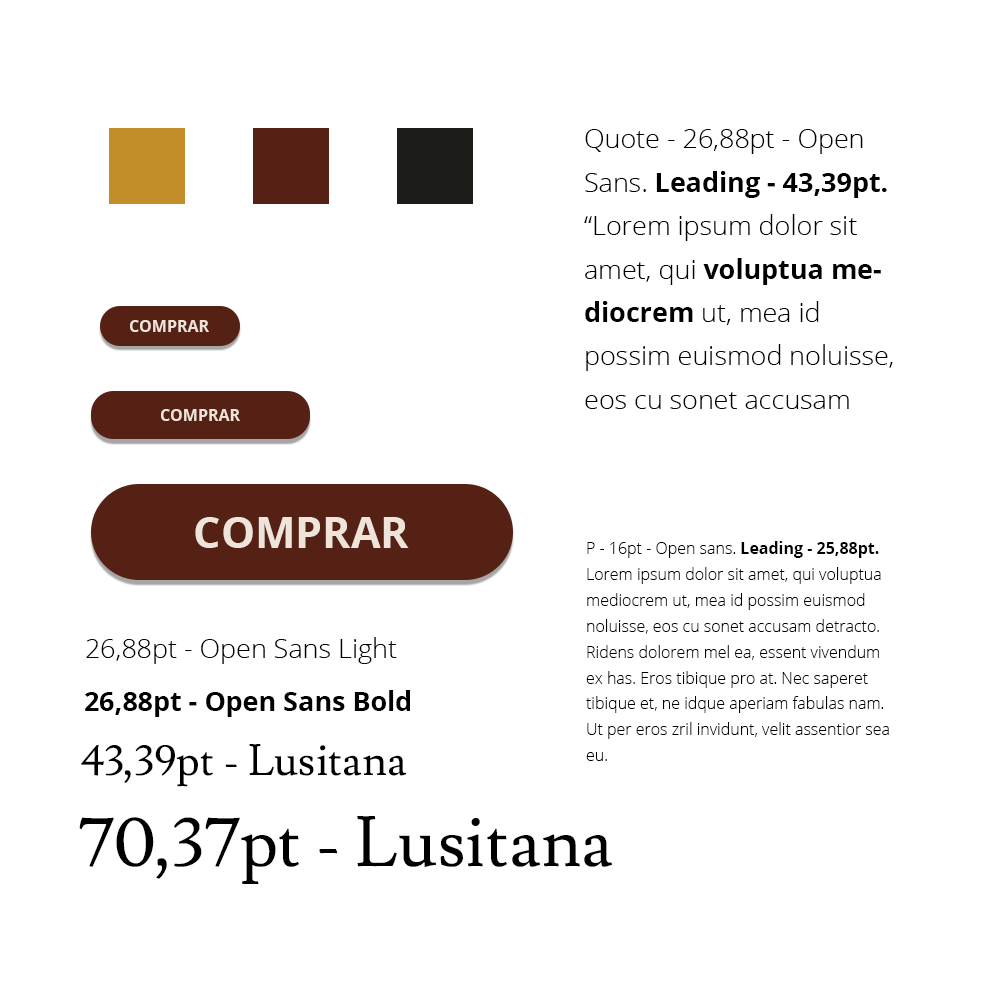
<style>
.page{position:relative;width:1000px;height:1000px;background:#ffffff}
.page>*{position:absolute;margin:0}
.t1{font:26.9px/43.4px "OpenSans-Light";color:#000000}
.t2{font:26.9px/43.4px "OpenSans-Bold";color:#000000}
.t3{font:16px "OpenSans-Bold";color:#efe4da}
.t4{font:43px "OpenSans-Bold";color:#efe4da}
.t5{font:16px/25.9px "OpenSans-Light";color:#000000}
.t6{font:16px/25.9px "OpenSans-Bold";color:#000000}
.t7{font:26.9px "OpenSans-Light";color:#000000}
.t8{font:26.9px "OpenSans-Bold";color:#000000}
.t9{font:43.5px "Lusitana";color:#000000}
.t10{font:70.4px "Lusitana";color:#000000}
</style>
<div class="page">
<p class="t1" style="left:584px;top:129px;width:309px;height:280px">Quote - 26,88pt - Open Sans. <span class="t2">Leading - 43,39pt. </span>“Lorem ipsum dolor sit amet, qui <span class="t2">voluptua mediocrem</span> ut, mea id possim euismod noluisse, eos cu sonet accusam detracto. Ridens.”</p>
<p class="t3" style="left:130px;top:320px;width:79px;height:12px">COMPRAR</p>
<p class="t3" style="left:161px;top:409px;width:79px;height:12px">COMPRAR</p>
<p class="t4" style="left:195px;top:517px;width:214px;height:31px">COMPRAR</p>
<p class="t5" style="left:586px;top:541px;width:303px;height:220px">P - 16pt - Open sans. <span class="t6">Leading - 25,88pt.</span> Lorem ipsum dolor sit amet, qui voluptua mediocrem ut, mea id possim euismod noluisse, eos cu sonet accusam detracto. Ridens dolorem mel ea, essent vivendum ex has. Eros tibique pro at. Nec saperet tibique et, ne idque aperiam fabulas nam. Ut per eros zril invidunt, velit assentior sea eu.</p>
<p class="t7" style="left:86px;top:637px;width:311px;height:27px">26,88pt - Open Sans Light</p>
<p class="t8" style="left:85px;top:690px;width:325px;height:27px">26,88pt - Open Sans Bold</p>
<p class="t9" style="left:81px;top:744px;width:326px;height:43px">43,39pt - Lusitana</p>
<p class="t10" style="left:79px;top:816px;width:533px;height:69px">70,37pt - Lusitana</p>
</div>
